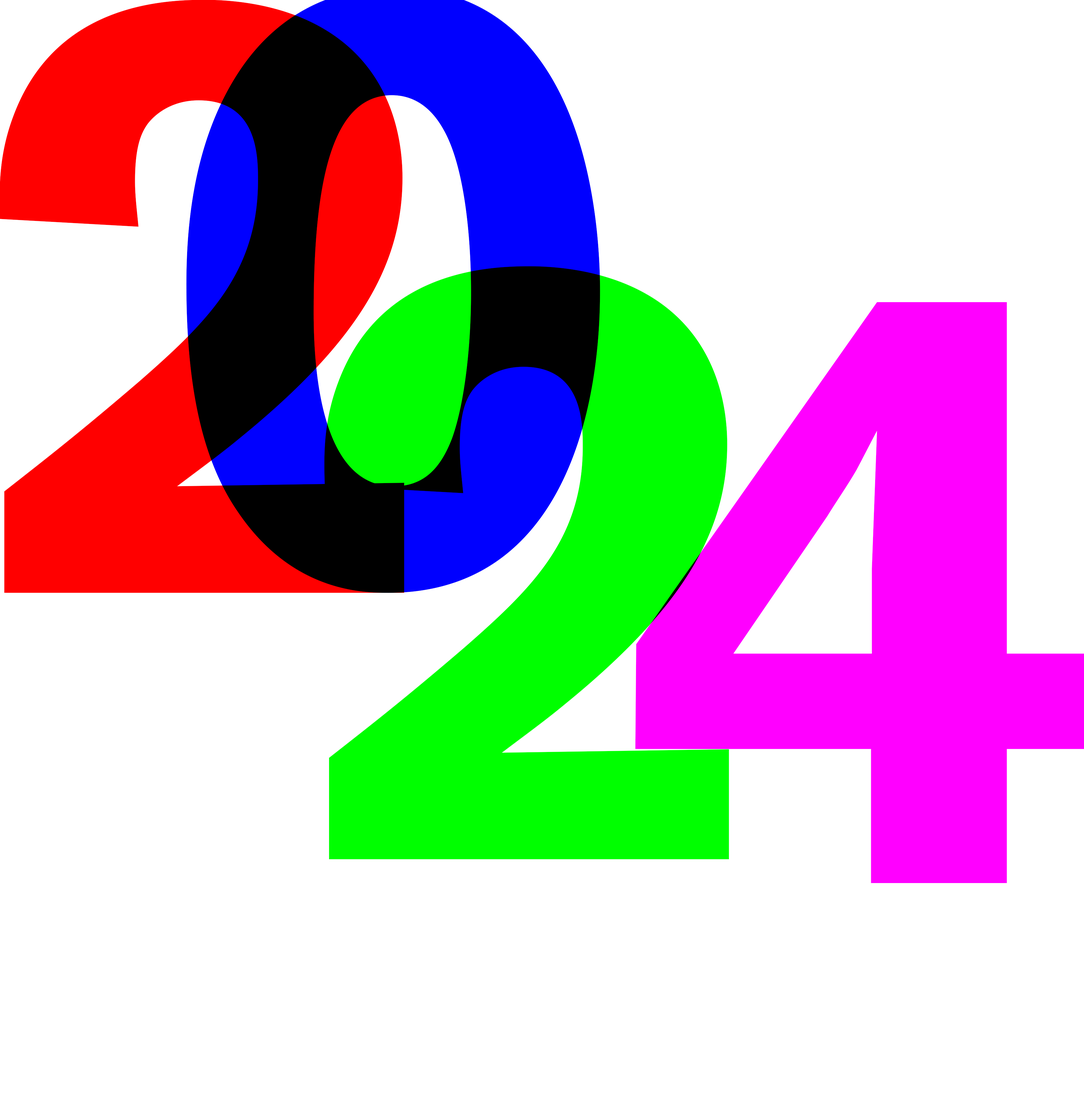
<style>
.page{position:relative;width:1084px;height:1100px;background:#ffffff}
.page>*{position:absolute;margin:0}
.t1{font:859.7px "AkzidenzGroteskBE-Bold"}
.t2{font:859.7px "AkzidenzGroteskBE-Bold";color:#00ff00}
.t3{font:859.7px "AkzidenzGroteskBE-Bold";color:#ff00ff}
</style>
<div class="page">
<p class="t1" style="left:0px;top:0px;width:404px;height:593px">2</p>
<p class="t2" style="left:324px;top:266px;width:405px;height:594px">2</p>
<p class="t3" style="left:635px;top:302px;width:449px;height:581px">4</p>
</div>
